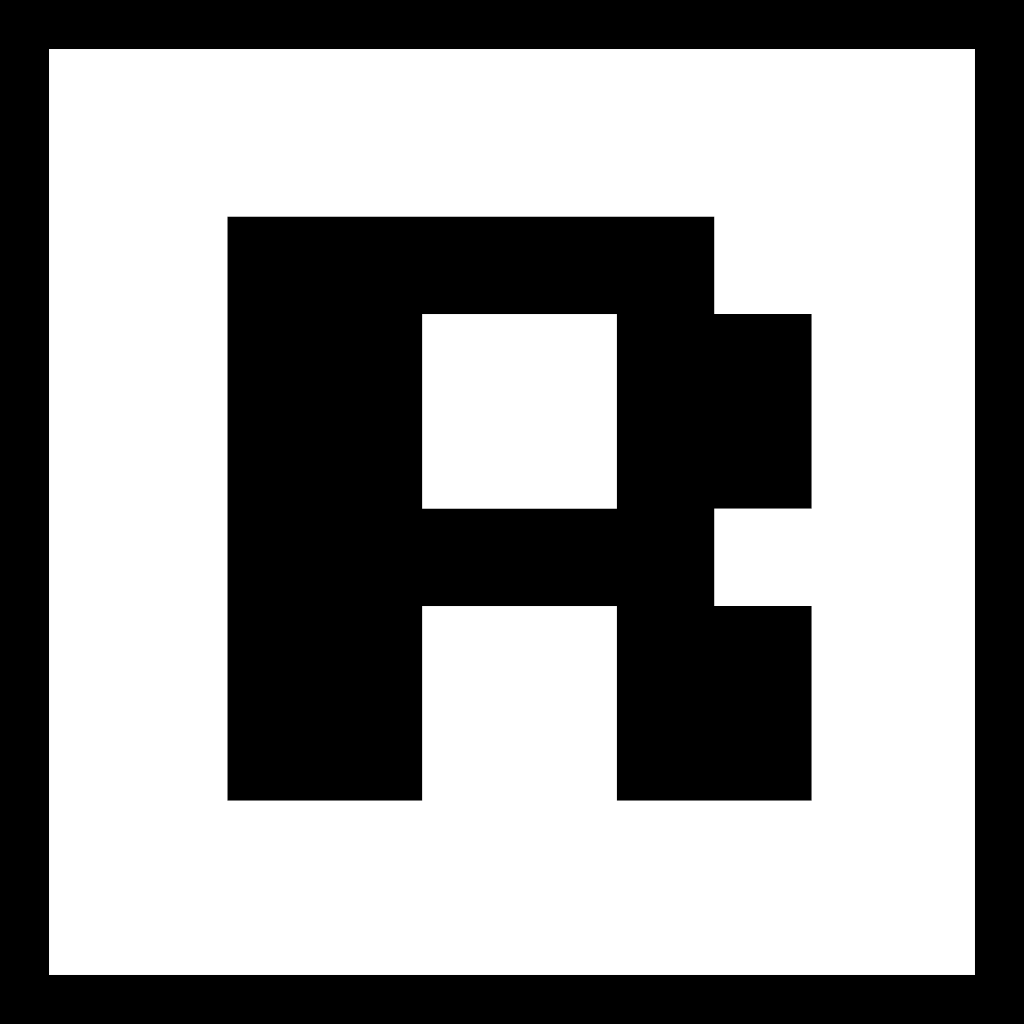
<style>
.page{position:relative;width:1024px;height:1024px;background:#ffffff}
.page>*{position:absolute;margin:0}
.t1{font:778.7px "M04_FATAL-FURY-BLACK";color:#000000}
</style>
<div class="page">
<p class="t1" style="left:227px;top:216px;width:585px;height:585px">R</p>
</div>
